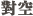
<style>
.page{position:relative;width:33px;height:16px;background:#ffffff}
.page>*{position:absolute;margin:0}
.t1{font:16px "RyuminPr6N-ExBold";color:#4c4743;font-weight:bold}
</style>
<div class="page">
<p class="t1" style="left:1px;top:0px;width:32px;height:16px">對空</p>
</div>
